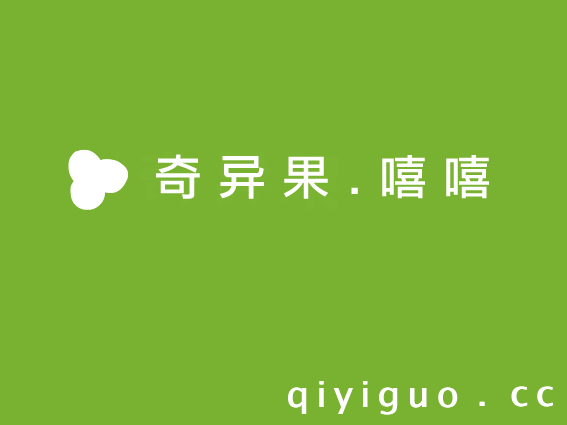
<style>
.page{position:relative;width:567px;height:425px;background:#79b231}
.page>*{position:absolute;margin:0}
.t1{font:48px "LiHeiPro";color:#ffffff}
.t2{font:36px "LucidaGrande";letter-spacing:0.2em;color:#ffffff}
</style>
<div class="page">
<p class="t1" style="left:156px;top:154px;width:333px;height:45px">奇 异 果 . 嘻 嘻</p>
<p class="t2" style="left:288px;top:381px;width:169px;height:34px">qiyiguo</p>
<p class="t2" style="left:289px;top:381px;width:169px;height:34px">qiyiguo</p>
<p class="t2" style="left:511px;top:386px;width:41px;height:21px">cc</p>
<p class="t2" style="left:512px;top:386px;width:41px;height:21px">cc</p>
<p class="t2" style="left:479px;top:401px;width:5px;height:5px">.</p>
<p class="t2" style="left:480px;top:401px;width:5px;height:5px">.</p>
</div>
